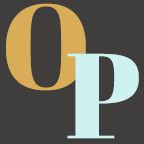
<style>
.page{position:relative;width:144px;height:144px;background:#403d3d}
.page>*{position:absolute;margin:0}
.t1{font:120px "AbrilFatface-Regular";color:#d9ad57;font-variant:small-caps}
.t2{font:120px "AbrilFatface-Regular";color:#cef2f0;font-variant:small-caps}
</style>
<div class="page">
<p class="t1" style="left:6px;top:3px;width:80px;height:88px">O</p>
<p class="t2" style="left:67px;top:53px;width:72px;height:86px">P</p>
</div>
